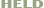
<style>
.page{position:relative;width:44px;height:8px;background:#99a484}
.page>*{position:absolute;margin:0}
.t1{font:12px "BritannicBold";color:#99a484;scale:1.54 1}
</style>
<div class="page">
<p class="t1" style="left:1px;top:0px;width:43px;height:8px">HELD</p>
</div>
